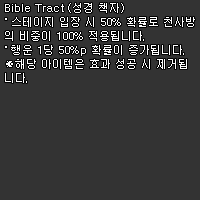
<style>
.page{position:relative;width:200px;height:200px;background:#333333}
.page>*{position:absolute;margin:0}
.t1{font:11px/14px "Dotum";color:#ffffff}
</style>
<div class="page">
<p class="t1" style="left:5px;top:3px;width:190px;height:80px">Bible Tract (성경 책자)<br>˚ 스테이지 입장 시 50% 확률로 천사방<br>의 비중이 100% 적용됩니다.<br>˚ 행운 1당 50%p 확률이 증가됩니다.<br>※해당 아이템은 효과 성공 시 제거됩<br>니다.</p>
</div>
